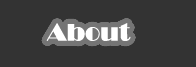
<style>
.page{position:relative;width:196px;height:67px;background:#333333}
.page>*{position:absolute;margin:0}
.t1{font:25px "Broadway";color:#ffffff}
</style>
<div class="page">
<p class="t1" style="left:46px;top:23px;width:85px;height:18px">About</p>
</div>
